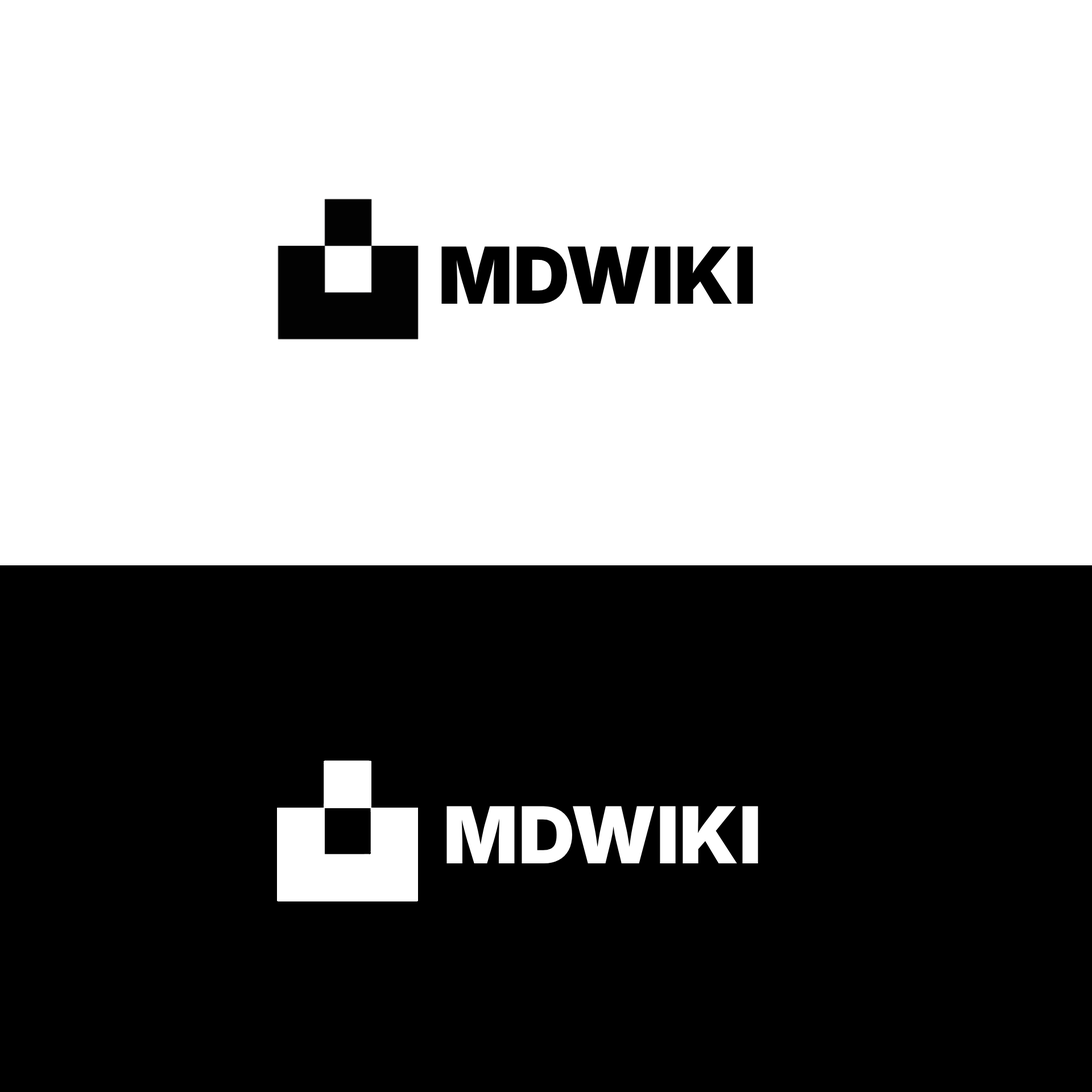
<style>
.page{position:relative;width:1092px;height:1092px;background:#ffffff}
.page>*{position:absolute;margin:0}
.t1{font:78.5px "Inter-Black";color:#000000}
.t2{font:78.5px "Inter-Black";color:#ffffff}
</style>
<div class="page">
<p class="t1" style="left:441px;top:246px;width:312px;height:58px">MDWIKI</p>
<p class="t2" style="left:446px;top:806px;width:312px;height:57px">MDWIKI</p>
</div>
